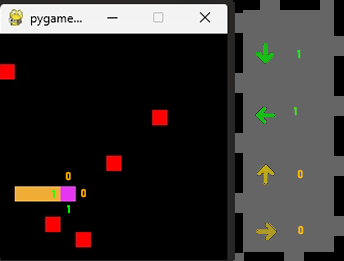
<style>
.page{position:relative;width:344px;height:261px;background:#000000}
.page>*{position:absolute;margin:0}
.t1{font:11px "Bahnschrift-Bold";color:#00ff00}
.t2{font:11px "Bahnschrift-Bold";color:#43e70a}
.t3{font:11px "Bahnschrift-Bold";color:#ffa800}
.t4{font:11px "Bahnschrift-Bold";color:#ffba00}
.t5{font:11px "Bahnschrift-Bold";color:#ffc000}
</style>
<div class="page">
<p class="t1" style="left:297px;top:50px;width:4px;height:9px">1</p>
<p class="t2" style="left:293px;top:107px;width:4px;height:9px">1</p>
<p class="t3" style="left:65px;top:171px;width:6px;height:10px">0</p>
<p class="t4" style="left:297px;top:169px;width:6px;height:10px">0</p>
<p class="t1" style="left:52px;top:190px;width:3px;height:9px">1</p>
<p class="t3" style="left:81px;top:188px;width:5px;height:10px">0</p>
<p class="t1" style="left:67px;top:205px;width:3px;height:9px">1</p>
<p class="t5" style="left:298px;top:225px;width:6px;height:10px">0</p>
</div>
